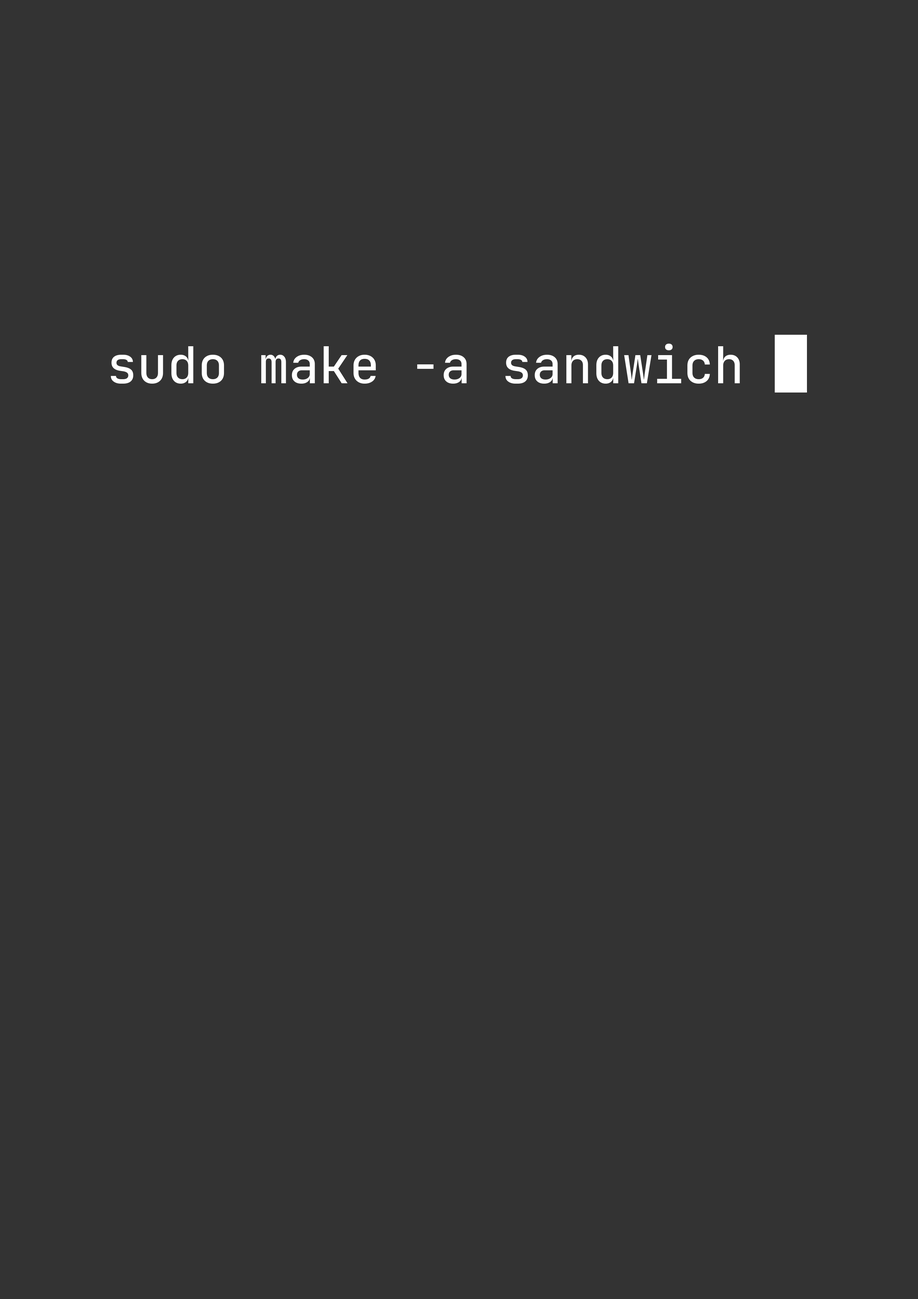
<style>
.page{position:relative;width:918px;height:1299px;background:#333333}
.page>*{position:absolute;margin:0}
.t1{font:50.7px "JetBrainsMono-Medium";color:#ffffff}
</style>
<div class="page">
<p class="t1" style="left:111px;top:344px;width:629px;height:40px">sudo make -a sandwich</p>
</div>
